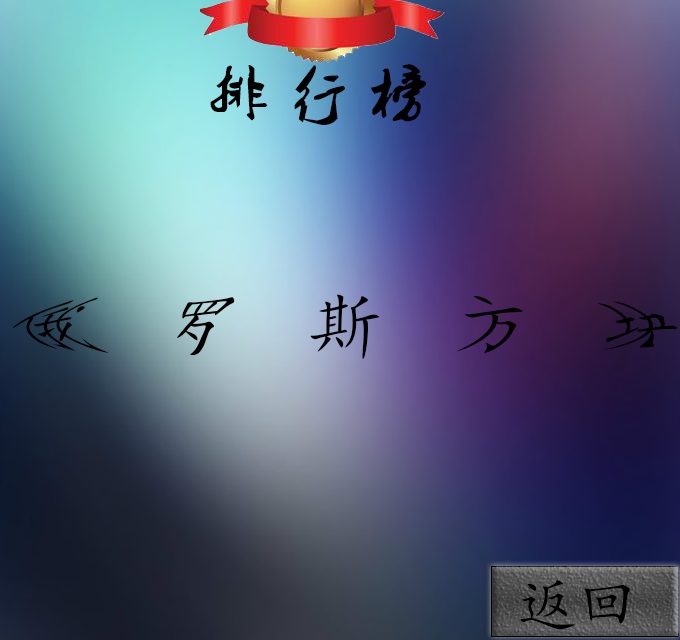
<style>
.page{position:relative;width:680px;height:640px}
.page>*{position:absolute;margin:0}
.t1{font:60px "2.0-";color:#000000}
.t2{font:60px "KaiTi";color:#000000}
</style>
<div class="page">
<p class="t1" style="left:210px;top:64px;width:216px;height:61px">排 行 榜</p>
<p class="t2" style="left:12px;top:294px;width:665px;height:65px">俄  罗  斯  方  块</p>
<p class="t2" style="left:520px;top:580px;width:110px;height:50px">返回</p>
</div>
